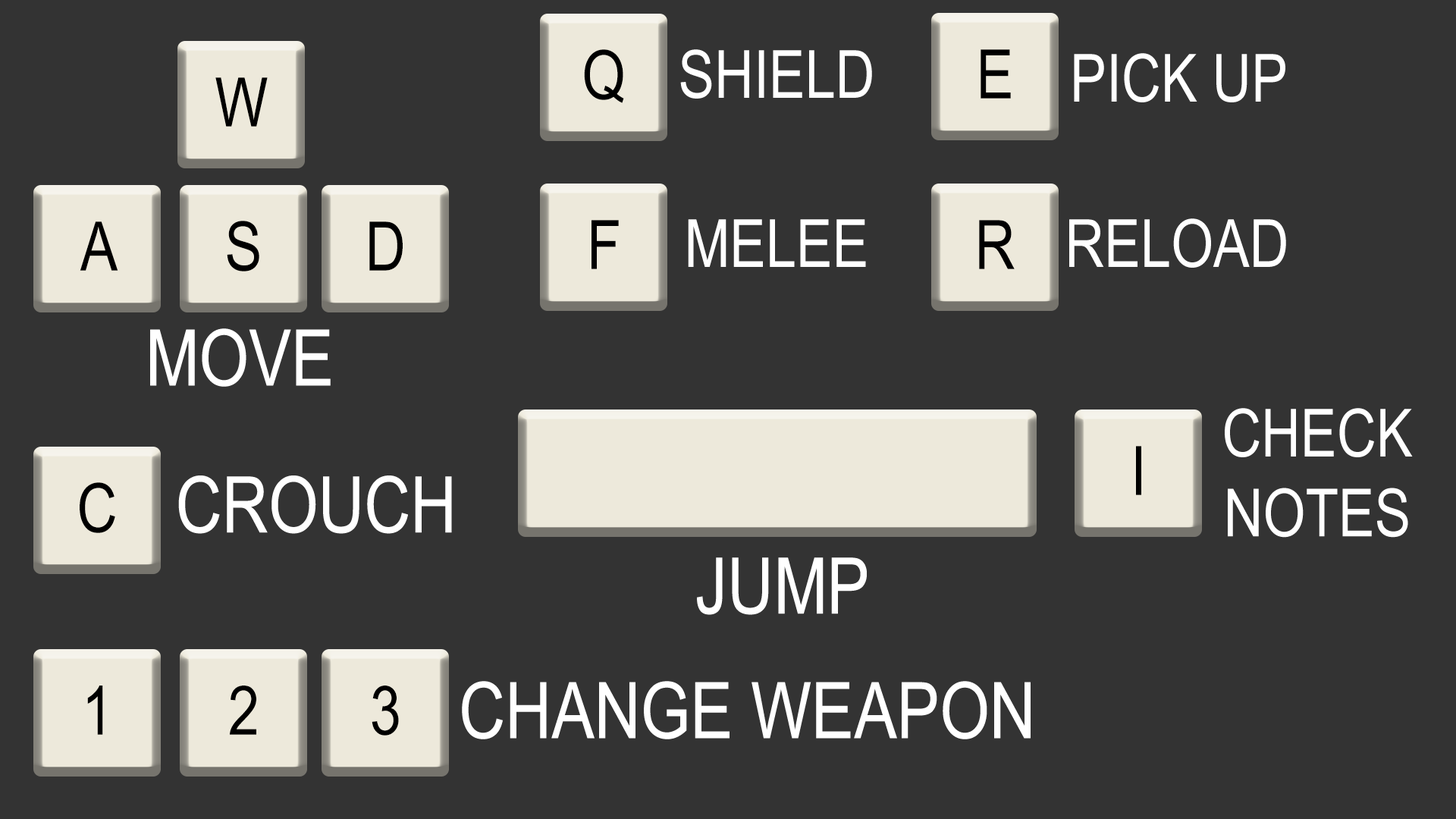
<style>
.page{position:relative;width:1456px;height:819px;background:#333333}
.page>*{position:absolute;margin:0}
.t1{font:68.5px "ArialNarrow";color:#000000}
.t2{font:66.4px "ArialNarrow";color:#ffffff}
.t3{font:78.1px "ArialNarrow";color:#ffffff}
</style>
<div class="page">
<p class="t1" style="left:584px;top:49px;width:40px;height:54px">Q</p>
<p class="t2" style="left:680px;top:49px;width:192px;height:50px">SHIELD</p>
<p class="t1" style="left:981px;top:49px;width:30px;height:50px">E</p>
<p class="t2" style="left:1074px;top:53px;width:211px;height:49px">PICK UP</p>
<p class="t1" style="left:215px;top:77px;width:53px;height:50px">W</p>
<p class="t1" style="left:80px;top:221px;width:38px;height:50px">A</p>
<p class="t1" style="left:227px;top:221px;width:32px;height:50px">S</p>
<p class="t1" style="left:369px;top:221px;width:34px;height:50px">D</p>
<p class="t1" style="left:591px;top:220px;width:28px;height:49px">F</p>
<p class="t2" style="left:688px;top:219px;width:178px;height:48px">MELEE</p>
<p class="t1" style="left:979px;top:220px;width:36px;height:49px">R</p>
<p class="t2" style="left:1069px;top:218px;width:217px;height:50px">RELOAD</p>
<p class="t3" style="left:150px;top:328px;width:181px;height:59px">MOVE</p>
<p class="t2" style="left:1225px;top:408px;width:188px;height:130px;text-align:center">CHECK<br>NOTES</p>
<p class="t1" style="left:1136px;top:446px;width:5px;height:49px">I</p>
<p class="t1" style="left:80px;top:482px;width:35px;height:51px">C</p>
<p class="t3" style="left:178px;top:475px;width:274px;height:59px">CROUCH</p>
<p class="t3" style="left:697px;top:557px;width:170px;height:58px">JUMP</p>
<p class="t1" style="left:87px;top:686px;width:16px;height:49px">1</p>
<p class="t1" style="left:230px;top:686px;width:26px;height:49px">2</p>
<p class="t1" style="left:372px;top:686px;width:27px;height:50px">3</p>
<p class="t3" style="left:462px;top:681px;width:569px;height:58px">CHANGE WEAPON</p>
</div>
